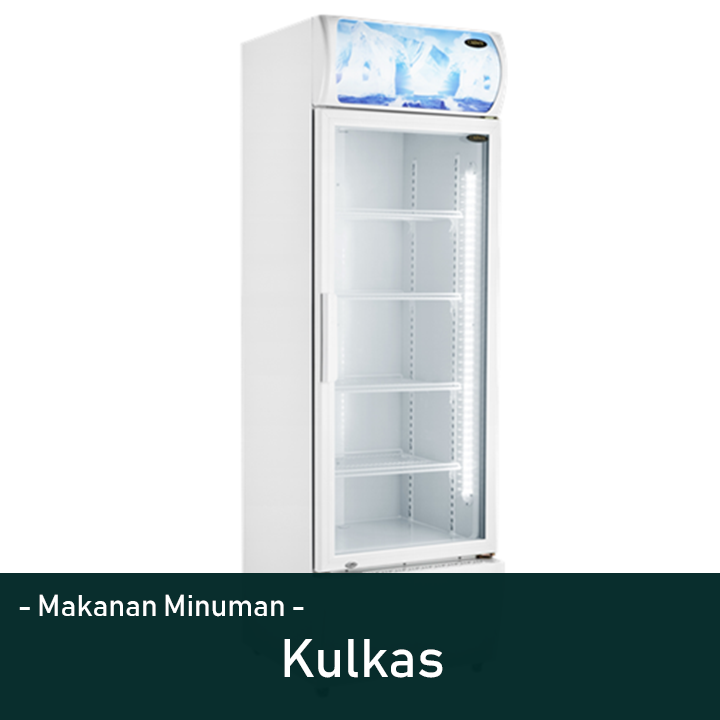
<style>
.page{position:relative;width:720px;height:720px;background:#ffffff}
.page>*{position:absolute;margin:0}
.t1{font:30px "Bahnschrift";color:#ffffff}
.t2{font:53.6px "Bahnschrift";color:#ffffff}
</style>
<div class="page">
<p class="t1" style="left:19px;top:594px;width:285px;height:23px">- Makanan Minuman -</p>
<p class="t2" style="left:284px;top:639px;width:159px;height:39px">Kulkas</p>
</div>
